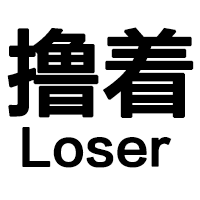
<style>
.page{position:relative;width:200px;height:200px;background:#ffffff}
.page>*{position:absolute;margin:0}
.t1{font:93px "FZLTZHK--GBK1-0";color:#000000;font-weight:bold}
.t2{font:48px "FZLTZHK--GBK1-0";color:#000000;font-weight:bold}
</style>
<div class="page">
<p class="t1" style="left:7px;top:27px;width:187px;height:91px">撸着</p>
<p class="t2" style="left:22px;top:127px;width:150px;height:41px">Loser</p>
</div>
